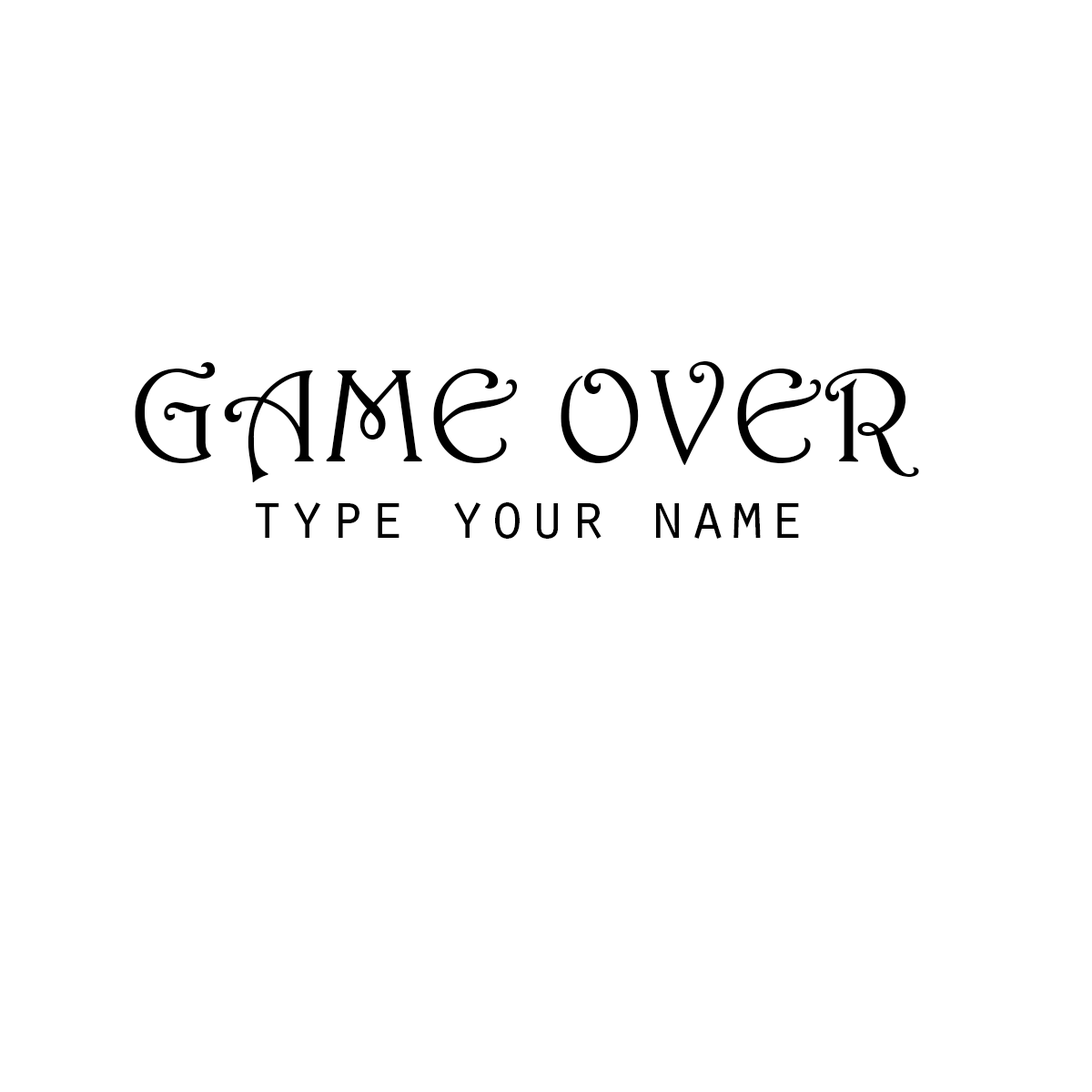
<style>
.page{position:relative;width:1092px;height:1092px;background:#ffffff}
.page>*{position:absolute;margin:0}
.t1{font:134.1px "Harrington";letter-spacing:0.01em;color:#000000}
.t2{font:65.5px "OratorStd";letter-spacing:0.01em;color:#000000}
</style>
<div class="page">
<p class="t1" style="left:135px;top:361px;width:784px;height:121px">GAME OVER</p>
<p class="t2" style="left:256px;top:502px;width:543px;height:37px">type your name</p>
</div>
